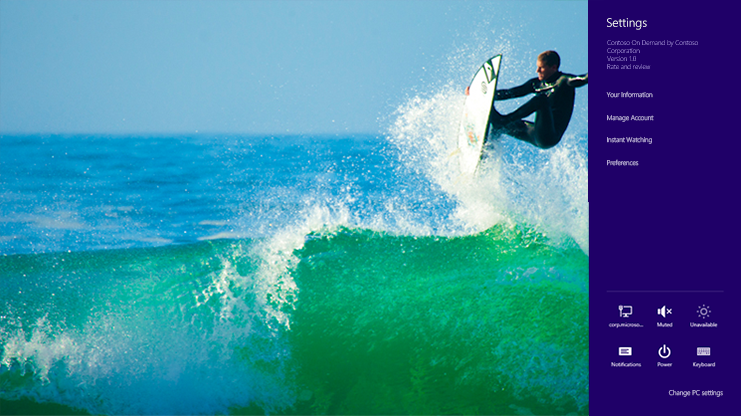
<style>
.page{position:relative;width:741px;height:416px}
.page>*{position:absolute;margin:0}
.t1{font:11.9px "SegoeUI-Semilight";color:#ffffff}
.t2{font:6.6px/8px "SegoeUI-Light";letter-spacing:-0.01em}
.t3{font:6.6px/22.6px "SegoeUI-Light";letter-spacing:-0.01em;color:#b3a5d2}
.t4{font:6.6px "SegoeUI-Light";color:#b4a6d3}
</style>
<div class="page">
<p class="t1" style="left:607px;top:18px;width:40px;height:12px">Settings</p>
<p class="t2" style="left:607px;top:40px;width:91px;height:29px">Contoso On Demand by Contoso<br>Corporation<br>Version 1.0<br>Rate and review</p>
<p class="t3" style="left:606px;top:91px;width:48px;height:75px">Your Information<br>Manage Account<br>Instant Watching<br>Preferences</p>
<p class="t4" style="left:668px;top:389px;width:55px;height:8px">Change PC settings</p>
</div>
